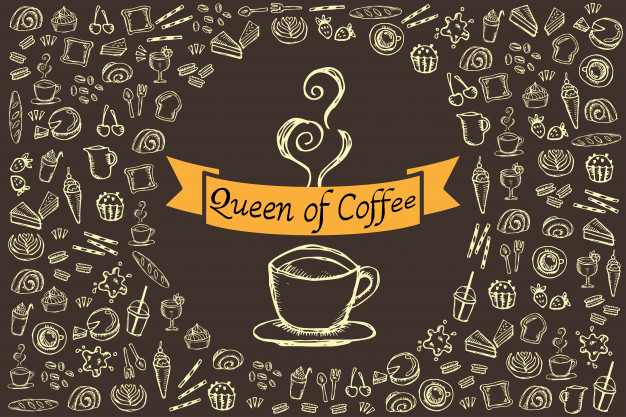
<style>
.page{position:relative;width:626px;height:417px;background:#3f322c}
.page>*{position:absolute;margin:0}
.t1{font:21.8px "LucidaCalligraphy-Italic";color:#000000;scale:1.16 1}
.t2{font:25.5px "LucidaCalligraphy-Italic";color:#000000;scale:1.16 1}
</style>
<div class="page">
<p class="t1" style="left:209px;top:187px;width:207px;height:47px"><span class="t2">Q</span>ueen of Coffee</p>
</div>
